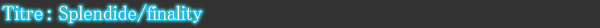
<style>
.page{position:relative;width:600px;height:28px;background:#333333}
.page>*{position:absolute;margin:0}
.t1{font:20px "MS-PMincho";color:#ffffff}
</style>
<div class="page">
<p class="t1" style="left:2px;top:4px;width:201px;height:19px">Titre : Splendide/finality</p>
</div>
